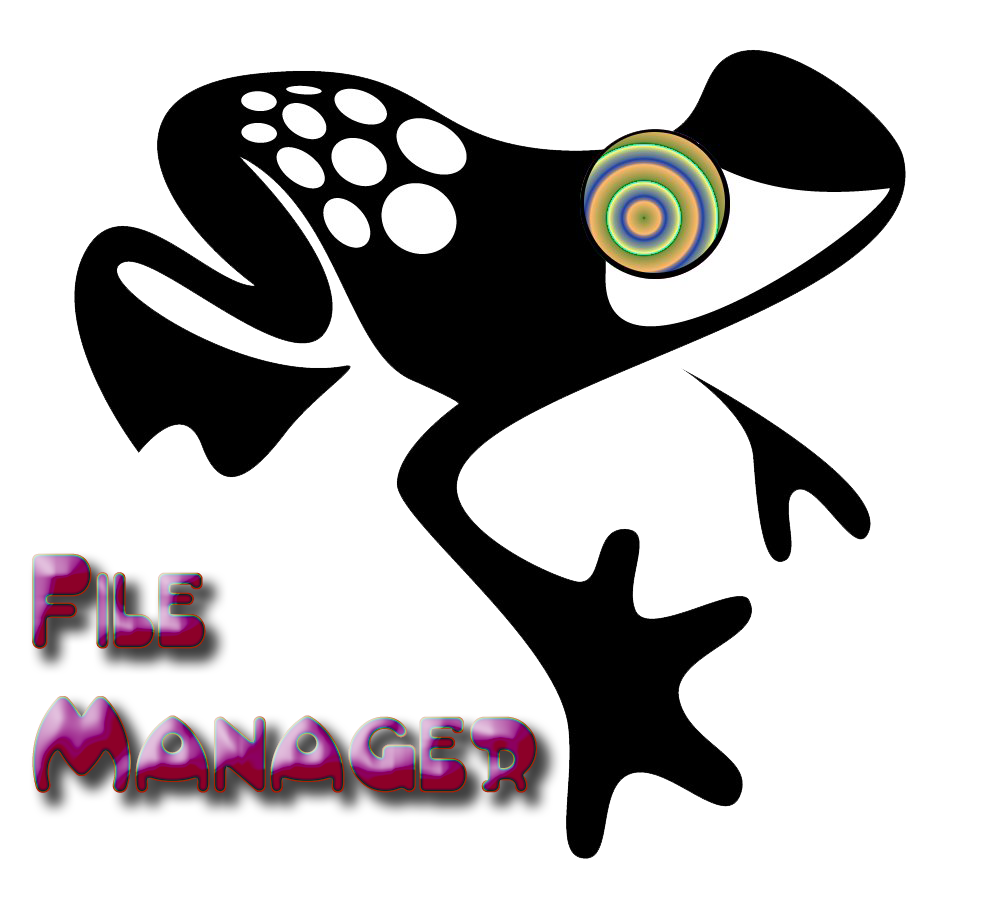
<style>
.page{position:relative;width:992px;height:900px;background:#ffffff}
.page>*{position:absolute;margin:0}
.t1{font:120px "AltamonteNF"}
</style>
<div class="page">
<p class="t1" style="left:32px;top:553px;width:505px;height:240px;text-align:right">File <br>Manager</p>
</div>
